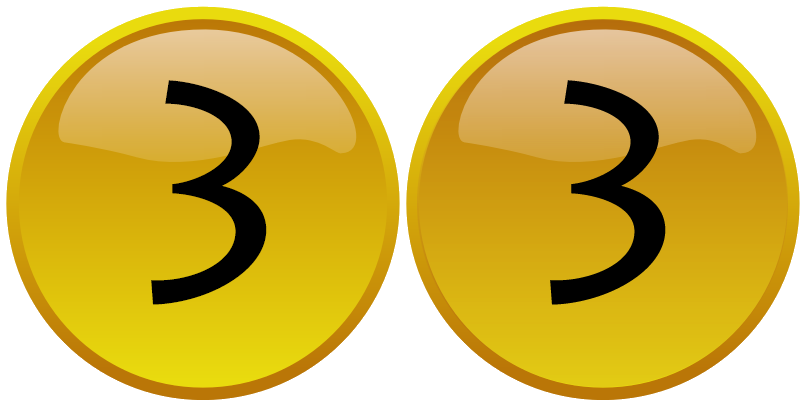
<style>
.page{position:relative;width:807px;height:406px;background:#ffffff}
.page>*{position:absolute;margin:0}
.t1{font:299.9px "LithosPro-Regular";color:#000000}
</style>
<div class="page">
<p class="t1" style="left:151px;top:80px;width:116px;height:225px">3</p>
</div>
